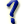
<style>
.page{position:relative;width:24px;height:24px;background:#ffffff}
.page>*{position:absolute;margin:0}
.t1{font:30px "MarkerFelt-Thin"}
</style>
<div class="page">
<p class="t1" style="left:6px;top:0px;width:13px;height:24px">?</p>
</div>
